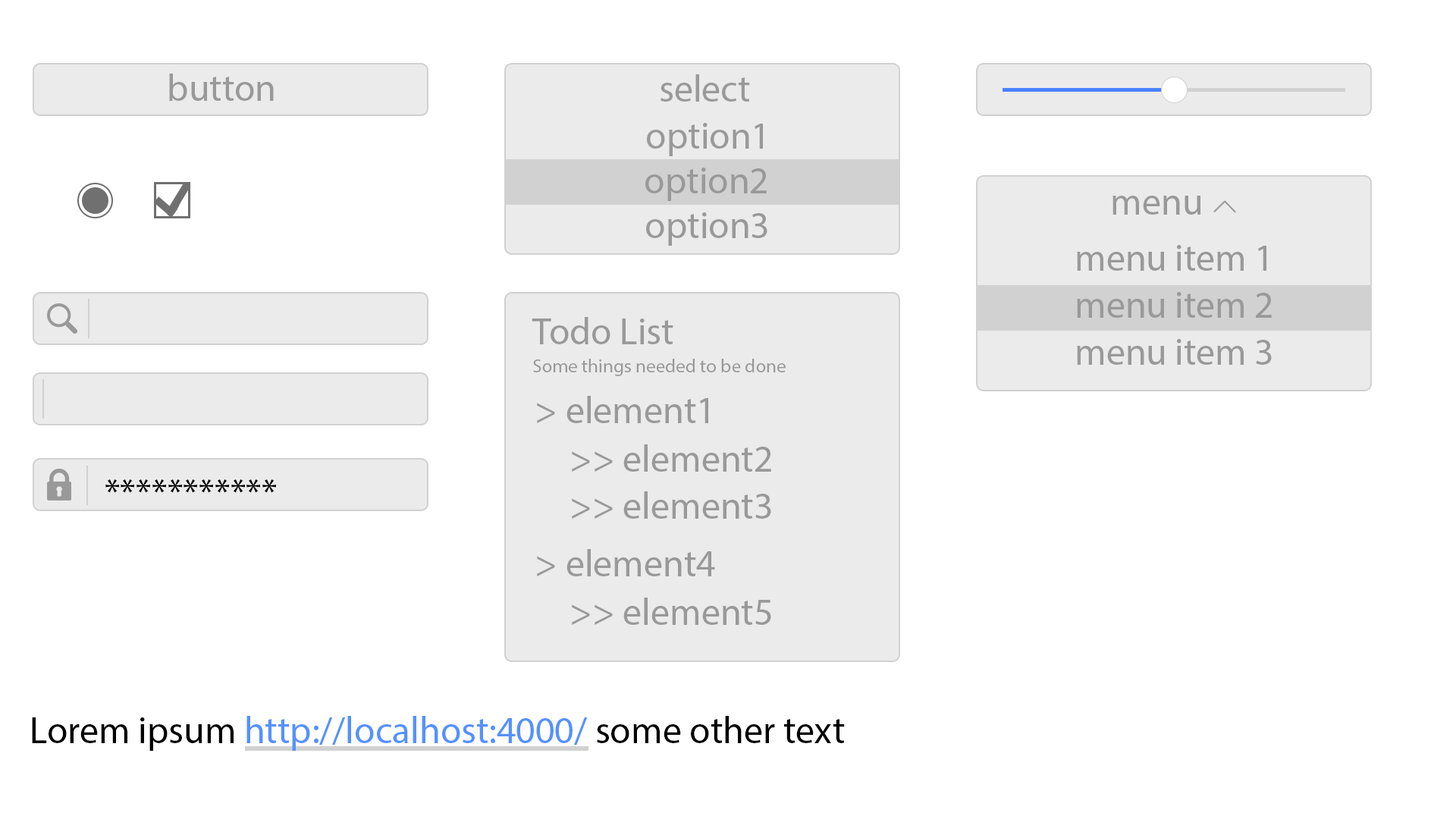
<style>
.page{position:relative;width:1456px;height:819px;background:#ffffff}
.page>*{position:absolute;margin:0}
.t1{font:37.9px "MyriadPro-Regular";color:#999999}
.t2{font:19px "MyriadPro-Regular";color:#999999}
.t3{font:37.9px "MyriadPro-Regular";color:#000000}
.t4{font:37.9px "MyriadPro-Regular";color:#5591ff}
</style>
<div class="page">
<p class="t1" style="left:169px;top:74px;width:105px;height:27px">button</p>
<p class="t1" style="left:660px;top:74px;width:90px;height:28px">select</p>
<p class="t1" style="left:647px;top:123px;width:116px;height:33px">option1</p>
<p class="t1" style="left:645px;top:168px;width:122px;height:33px">option2</p>
<p class="t1" style="left:1112px;top:196px;width:89px;height:19px">menu</p>
<p class="t1" style="left:646px;top:212px;width:121px;height:34px">option3</p>
<p class="t1" style="left:1077px;top:245px;width:189px;height:26px">menu item 1</p>
<p class="t1" style="left:1077px;top:292px;width:195px;height:26px">menu item 2</p>
<p class="t1" style="left:532px;top:317px;width:141px;height:27px">Todo List</p>
<p class="t1" style="left:1077px;top:339px;width:195px;height:26px">menu item 3</p>
<p class="t2" style="left:533px;top:359px;width:253px;height:17px">Some things needed to be done</p>
<p class="t1" style="left:537px;top:396px;width:171px;height:27px">&gt; element1</p>
<p class="t1" style="left:572px;top:444px;width:199px;height:28px">&gt;&gt; element2</p>
<p class="t3" style="left:105px;top:479px;width:171px;height:14px">***********</p>
<p class="t1" style="left:572px;top:491px;width:199px;height:28px">&gt;&gt; element3</p>
<p class="t1" style="left:537px;top:549px;width:178px;height:27px">&gt; element4</p>
<p class="t1" style="left:572px;top:598px;width:199px;height:27px">&gt;&gt; element5</p>
<p class="t4" style="left:32px;top:716px;width:813px;height:35px"><span class="t3">Lorem ipsum </span>http://localhost:4000/<span class="t3"> some other text</span></p>
</div>
